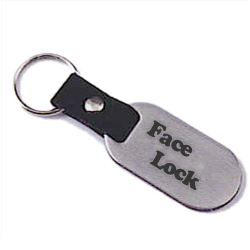
<style>
.page{position:relative;width:250px;height:250px;background:#ffffff}
.page>*{position:absolute;margin:0}
.t1{font:22px/24px "CooperBlackStd";letter-spacing:-0.05em;color:#373737}
</style>
<div class="page">
<p class="t1" style="left:146px;top:120px;width:53px;height:70px;rotate:30deg">Face<br>   Lock</p>
</div>
